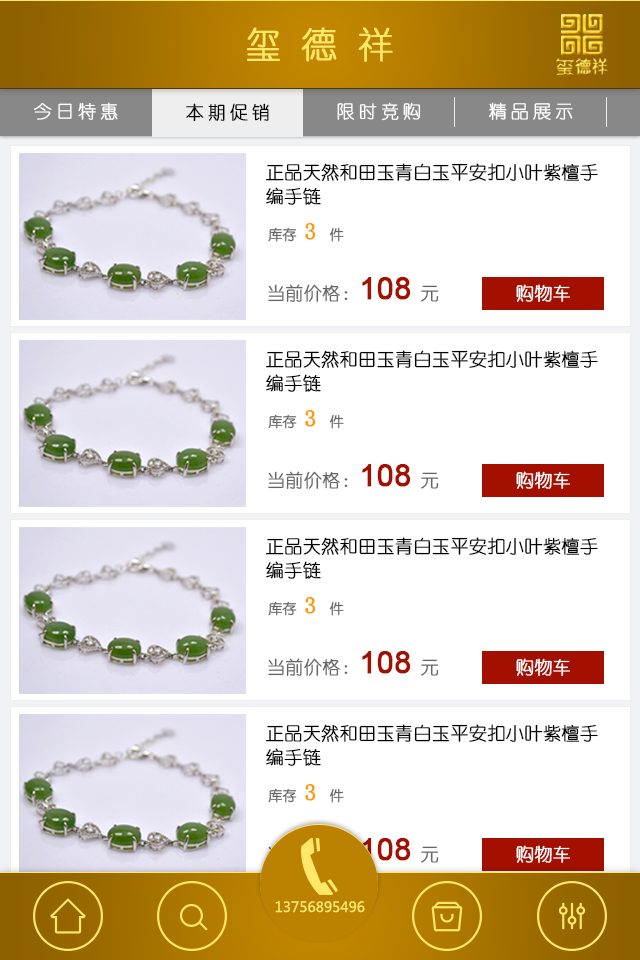
<style>
.page{position:relative;width:640px;height:960px;background:#ffffff}
.page>*{position:absolute;margin:0}
.t1{font:36px "YouYuan";color:#ffe867;font-weight:bold}
.t2{font:18px "YouYuan";letter-spacing:0.2em;color:#ffffff;font-weight:bold}
.t3{font:18px "YouYuan";letter-spacing:0.2em;color:#000000;font-weight:bold}
.t4{font:18px/24px "YouYuan";color:#000000;font-weight:bold}
.t5{font:14px "YouYuan";color:#666666;font-weight:bold}
.t6{font:24px "YouYuan";color:#fe9900;font-weight:bold}
.t7{font:18px "YouYuan";color:#666666;font-weight:bold}
.t8{font:30px "ArialMT";color:#a31000;font-weight:bold}
.t9{font:18px "YouYuan";color:#ffffff;font-weight:bold}
.t10{font:14px "MicrosoftYaHei";color:#ffe867}
</style>
<div class="page">
<p class="t1" style="left:247px;top:27px;width:146px;height:35px">玺 德 祥</p>
<p class="t2" style="left:34px;top:102px;width:84px;height:18px">今日特惠</p>
<p class="t2" style="left:337px;top:102px;width:84px;height:19px">限时竞购</p>
<p class="t2" style="left:489px;top:102px;width:84px;height:18px">精品展示</p>
<p class="t3" style="left:186px;top:103px;width:83px;height:19px">本期促销</p>
<p class="t4" style="left:266px;top:163px;width:332px;height:42px">正品天然和田玉青白玉平安扣小叶紫檀手<br>编手链</p>
<p class="t5" style="left:268px;top:223px;width:76px;height:19px">库存 <span class="t6">3 </span>件</p>
<p class="t7" style="left:268px;top:277px;width:171px;height:25px">当前价格：<span class="t8">108 </span>元</p>
<p class="t9" style="left:516px;top:284px;width:54px;height:18px">购物车</p>
<p class="t4" style="left:266px;top:350px;width:332px;height:42px">正品天然和田玉青白玉平安扣小叶紫檀手<br>编手链</p>
<p class="t5" style="left:268px;top:410px;width:76px;height:19px">库存 <span class="t6">3 </span>件</p>
<p class="t7" style="left:268px;top:464px;width:171px;height:25px">当前价格：<span class="t8">108 </span>元</p>
<p class="t9" style="left:516px;top:471px;width:54px;height:18px">购物车</p>
<p class="t4" style="left:266px;top:537px;width:332px;height:42px">正品天然和田玉青白玉平安扣小叶紫檀手<br>编手链</p>
<p class="t5" style="left:268px;top:597px;width:76px;height:19px">库存 <span class="t6">3 </span>件</p>
<p class="t7" style="left:268px;top:651px;width:171px;height:25px">当前价格：<span class="t8">108 </span>元</p>
<p class="t9" style="left:516px;top:658px;width:54px;height:18px">购物车</p>
<p class="t4" style="left:266px;top:724px;width:332px;height:42px">正品天然和田玉青白玉平安扣小叶紫檀手<br>编手链</p>
<p class="t5" style="left:268px;top:784px;width:76px;height:19px">库存 <span class="t6">3 </span>件</p>
<p class="t7" style="left:268px;top:838px;width:171px;height:25px">当前价格：<span class="t8">108 </span>元</p>
<p class="t9" style="left:516px;top:845px;width:54px;height:18px">购物车</p>
<p class="t10" style="left:275px;top:901px;width:90px;height:12px">13756895496</p>
</div>
